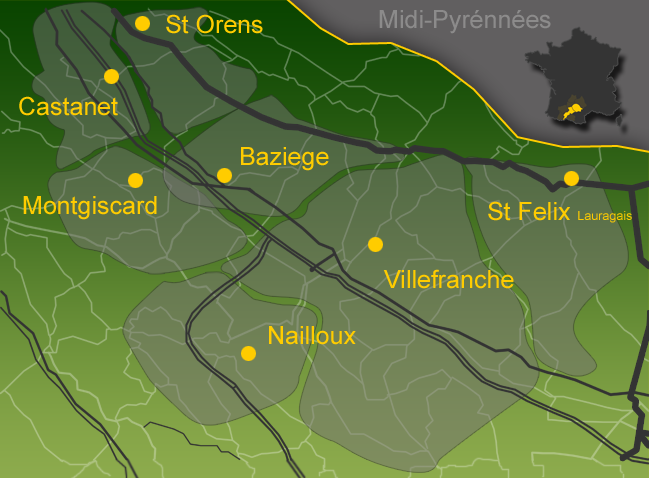
<style>
.page{position:relative;width:649px;height:478px}
.page>*{position:absolute;margin:0}
.t1{font:25px "ArialMT";color:#ffcc00}
.t2{font:25px "ArialMT";color:#8c8b8b}
.t3{font:12.5px "ArialMT";color:#ffcc00}
</style>
<div class="page">
<p class="t1" style="left:166px;top:14px;width:97px;height:20px">St Orens</p>
<p class="t2" style="left:379px;top:10px;width:172px;height:24px">Midi-Pyrénnées</p>
<p class="t1" style="left:19px;top:96px;width:99px;height:20px">Castanet</p>
<p class="t1" style="left:241px;top:147px;width:88px;height:24px">Baziege</p>
<p class="t1" style="left:23px;top:196px;width:134px;height:24px">Montgiscard</p>
<p class="t3" style="left:488px;top:201px;width:144px;height:22px"><span class="t1">St Felix </span>Lauragais</p>
<p class="t1" style="left:383px;top:269px;width:131px;height:20px">Villefranche</p>
<p class="t1" style="left:269px;top:326px;width:87px;height:19px">Nailloux</p>
</div>
